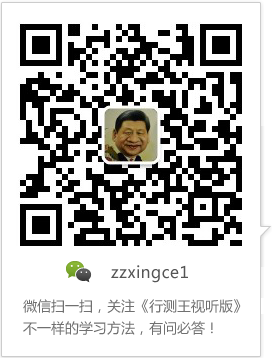
<style>
.page{position:relative;width:272px;height:358px;background:#ffffff}
.page>*{position:absolute;margin:0}
.t1{font:16px "MicrosoftYaHei";letter-spacing:0.025em;color:#555555}
.t2{font:14px/22px "MicrosoftYaHei";color:#707070}
</style>
<div class="page">
<p class="t1" style="left:111px;top:265px;width:77px;height:18px">zzxingce1</p>
<p class="t2" style="left:23px;top:299px;width:218px;height:36px">微信扫一扫，关注《行测王视听版》<br>不一样的学习方法，有问必答！</p>
</div>
